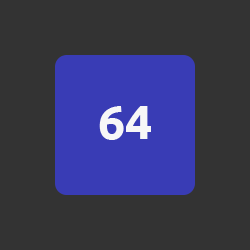
<style>
.page{position:relative;width:250px;height:250px;background:#333333}
.page>*{position:absolute;margin:0}
.t1{font:48px "Ubuntu-Bold";color:#f7f7f7}
</style>
<div class="page">
<p class="t1" style="left:99px;top:106px;width:52px;height:34px">64</p>
</div>
